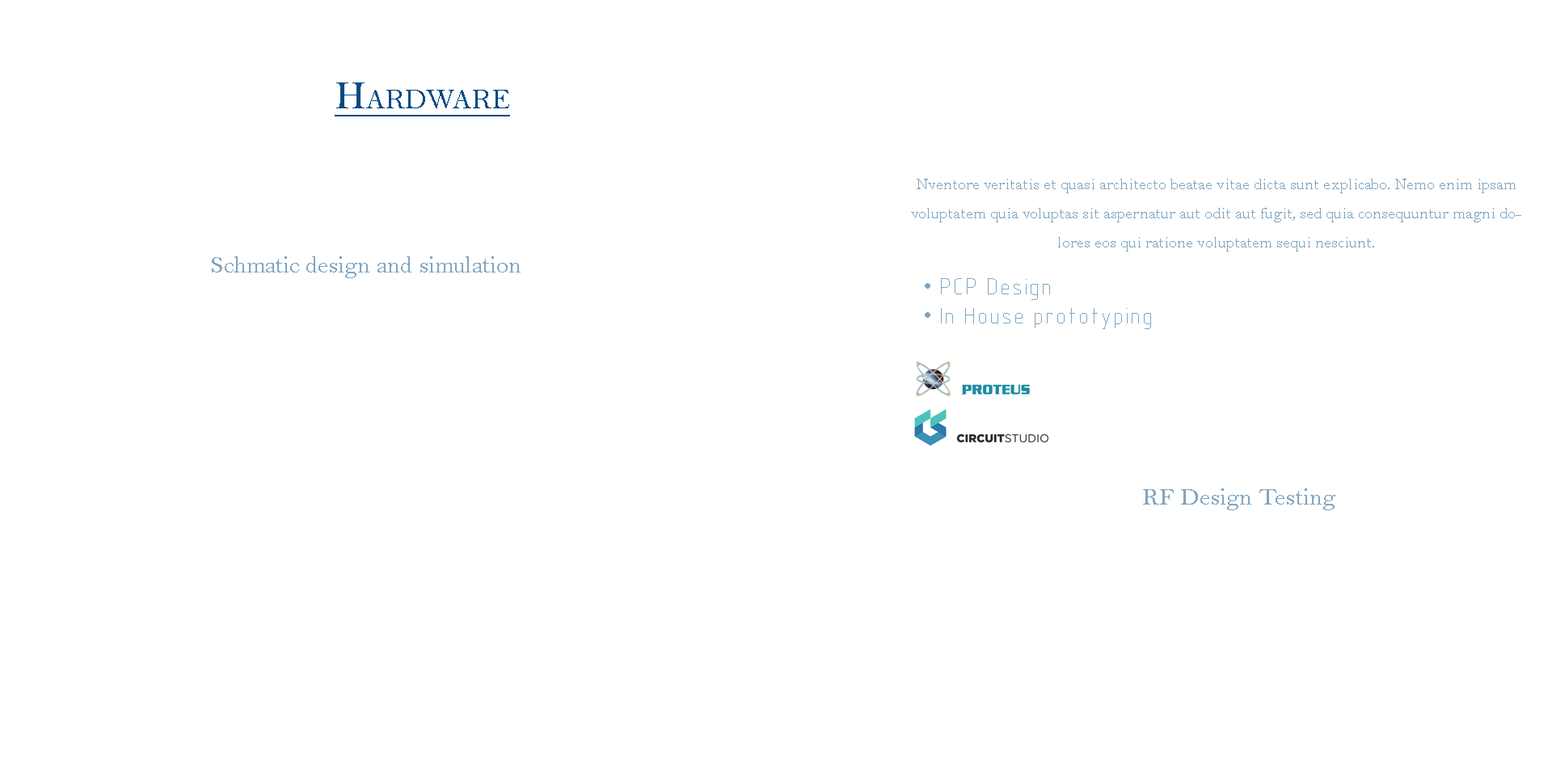
<style>
.page{position:relative;width:1552px;height:769px;background:#ffffff}
.page>*{position:absolute;margin:0}
.t1{font:40.4px "BellMT";color:#004a83;font-variant:small-caps;text-decoration:underline}
.t2{font:16.2px/29.1px "BellMT";color:#80a5c1}
.t3{font:24.2px "BellMT";color:#80a5c1}
.t4{font:24.2px/29.1px "GENISO";color:#80a5c1}
.t5{font:24.2px/29.1px "TimesNewRomanPSMT";color:#80a5c1}
</style>
<div class="page">
<p class="t1" style="left:335px;top:82px;width:175px;height:34px">Hardware</p>
<p class="t2" style="left:911px;top:179px;width:610px;height:72px;text-align:center">Nventore veritatis et quasi architecto beatae vitae dicta sunt explicabo. Nemo enim ipsam voluptatem quia voluptas sit aspernatur aut odit aut fugit, sed quia consequuntur magni dolores eos qui ratione voluptatem sequi nesciunt.</p>
<p class="t3" style="left:212px;top:256px;width:308px;height:22px">Schmatic design and simulation</p>
<p class="t4" style="left:924px;top:278px;width:227px;height:51px"><span class="t5">• </span>PCP Design<br><span class="t5">• </span>In House prototyping</p>
<p class="t3" style="left:1143px;top:488px;width:192px;height:22px">RF Design Testing</p>
</div>
